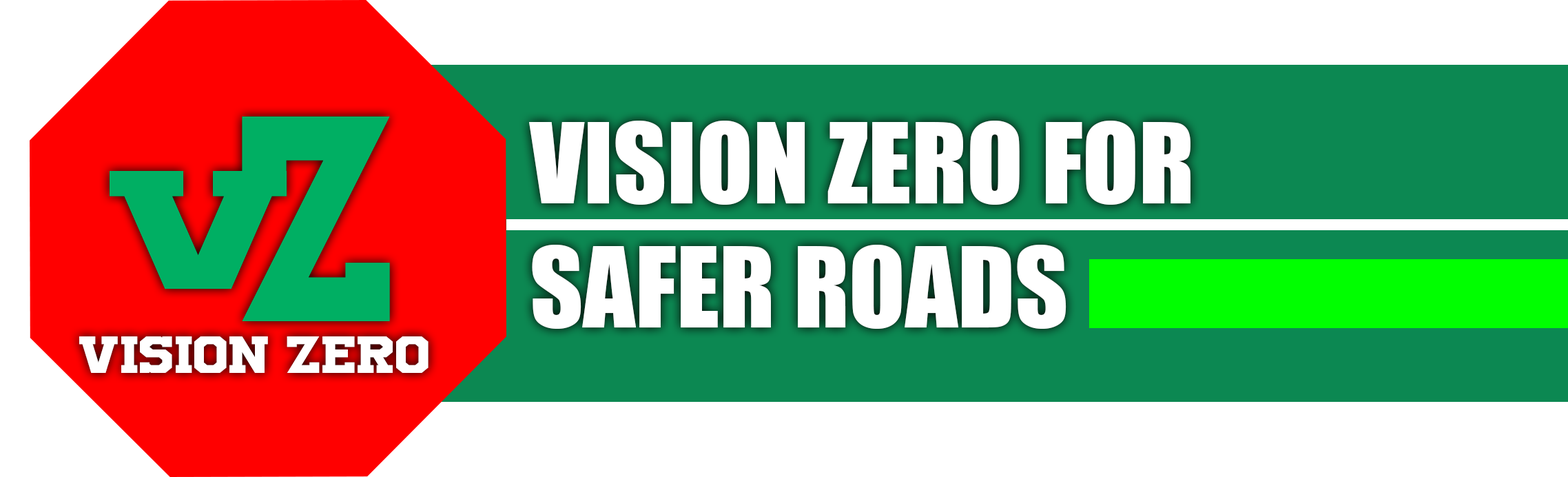
<style>
.page{position:relative;width:1568px;height:477px;background:#ffffff}
.page>*{position:absolute;margin:0}
.t1{font:204.6px "UniversityRegular";color:#00af63}
.t2{font:102.3px "Impact";color:#ffffff}
.t3{font:117.7px "UniversityRegular";color:#00af63;scale:1.76 1}
.t4{font:36.2px "UniversityRegular";color:#ffffff;scale:1.24 1}
</style>
<div class="page">
<p class="t1" style="left:242px;top:116px;width:148px;height:205px">z</p>
<p class="t2" style="left:529px;top:121px;width:661px;height:208px">VISION ZERO FOR<br>SAFER ROADS</p>
<p class="t3" style="left:110px;top:171px;width:177px;height:118px">v</p>
<p class="t4" style="left:79px;top:336px;width:350px;height:37px">vision zero</p>
</div>
